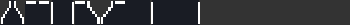
<style>
.page{position:relative;width:350px;height:25px;background:#333333}
.page>*{position:absolute;margin:0}
.t1{font:52px "Coder's-Crux";color:#ffffff;scale:0.63 1}
.t2{font:48px "Coder's-Crux";color:#ffffff;scale:0.69 1}
.t3{font:49.2px "Coder's-Crux";color:#ffffff;scale:0.55 1}
.t4{font:52.8px "Coder's-Crux";color:#ffffff;scale:0.77 1}
.t5{font:52.8px "Coder's-Crux";color:#ffffff;scale:0.75 1}
</style>
<div class="page">
<p class="t1" style="left:1px;top:1px;width:23px;height:23px">/\</p>
<p class="t2" style="left:26px;top:1px;width:23px;height:3px">--</p>
<p class="t3" style="left:51px;top:2px;width:23px;height:22px">| |</p>
<p class="t4" style="left:87px;top:1px;width:13px;height:23px">\</p>
<p class="t5" style="left:101px;top:1px;width:12px;height:23px">/</p>
</div>
